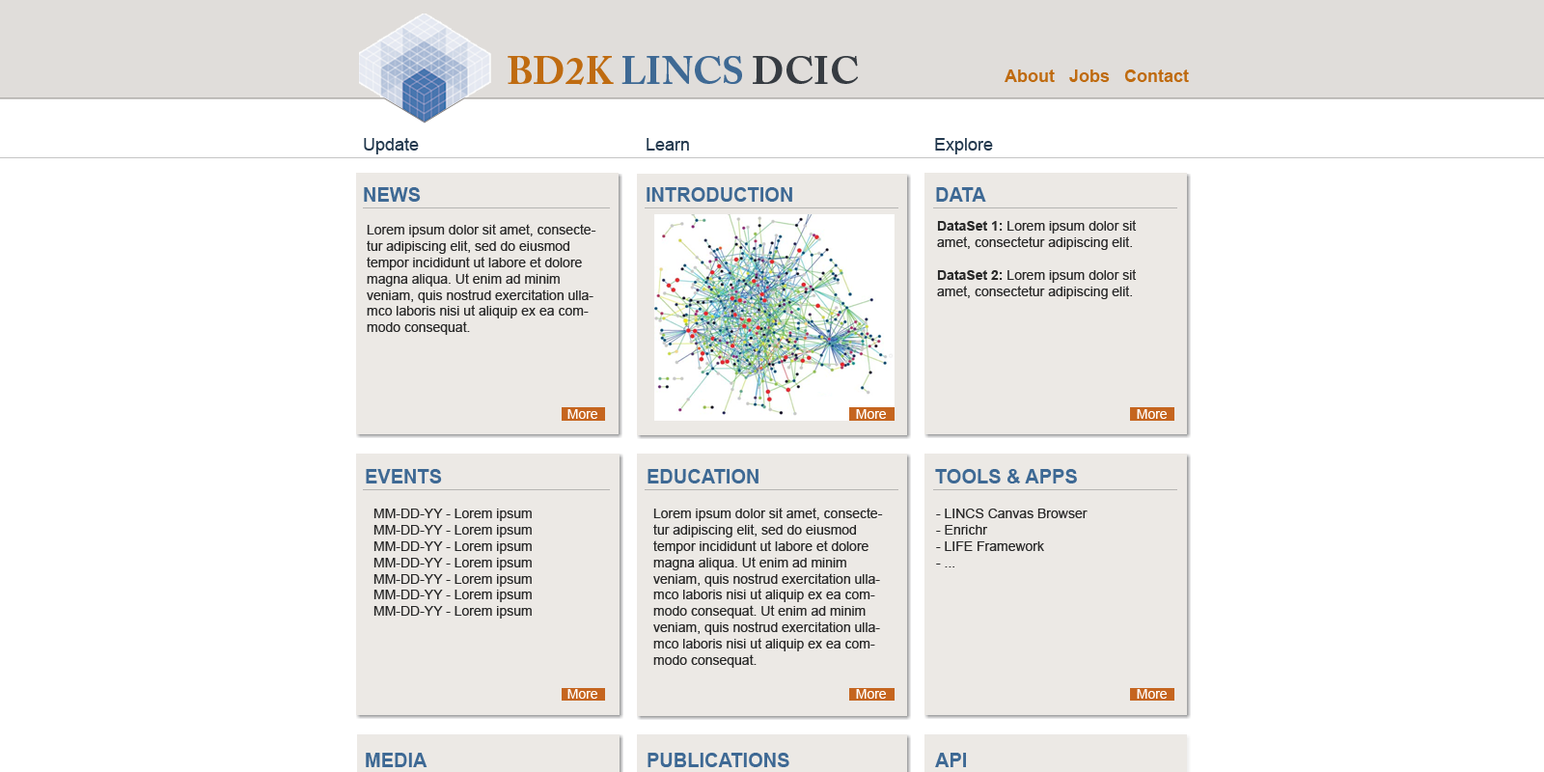
<style>
.page{position:relative;width:1544px;height:772px;background:#ffffff}
.page>*{position:absolute;margin:0}
.t1{font:38.6px "ACaslonPro-Bold";color:#3e6994}
.t2{font:38.6px "ACaslonPro-Bold";color:#bf6b10}
.t3{font:38.6px "ACaslonPro-Bold";color:#363b41}
.t4{font:17.4px "Arial-BoldMT";color:#bf6b10}
.t5{font:17.4px "ArialMT";color:#23394e}
.t6{font:19.3px "Arial-BoldMT";color:#3e6994}
.t7{font:13.5px "ArialMT";color:#292929}
.t8{font:13.5px "Arial-BoldMT";color:#292929}
.t9{font:13.5px "ArialMT";color:#ffffff}
</style>
<div class="page">
<p class="t1" style="left:508px;top:55px;width:350px;height:30px"><span class="t2">BD2K </span>LINCS <span class="t3">DCIC</span></p>
<p class="t4" style="left:1005px;top:69px;width:184px;height:13px">About   Jobs   Contact</p>
<p class="t5" style="left:364px;top:138px;width:55px;height:16px">Update</p>
<p class="t5" style="left:647px;top:138px;width:42px;height:13px">Learn</p>
<p class="t5" style="left:935px;top:138px;width:58px;height:16px">Explore</p>
<p class="t6" style="left:364px;top:187px;width:57px;height:15px">NEWS</p>
<p class="t6" style="left:647px;top:187px;width:145px;height:15px">INTRODUCTION</p>
<p class="t6" style="left:936px;top:187px;width:50px;height:15px">DATA</p>
<p class="t7" style="left:937px;top:220px;width:200px;height:79px"><span class="t8">DataSet 1:</span> Lorem ipsum dolor sit amet, consectetur adipiscing elit.<br><br><span class="t8">DataSet 2:</span> Lorem ipsum dolor sit amet, consectetur adipiscing elit.</p>
<p class="t7" style="left:367px;top:224px;width:229px;height:111px">Lorem ipsum dolor sit amet, consectetur adipiscing elit, sed do eiusmod tempor incididunt ut labore et dolore magna aliqua. Ut enim ad minim veniam, quis nostrud exercitation ullamco laboris nisi ut aliquip ex ea commodo consequat.</p>
<p class="t9" style="left:568px;top:409px;width:29px;height:10px">More</p>
<p class="t9" style="left:856px;top:409px;width:30px;height:10px">More</p>
<p class="t9" style="left:1137px;top:409px;width:30px;height:10px">More</p>
<p class="t6" style="left:366px;top:469px;width:76px;height:15px">EVENTS</p>
<p class="t6" style="left:648px;top:469px;width:111px;height:15px">EDUCATION</p>
<p class="t6" style="left:935px;top:469px;width:142px;height:15px">TOOLS &amp; APPS</p>
<p class="t7" style="left:374px;top:509px;width:158px;height:110px">MM-DD-YY - Lorem ipsum<br>MM-DD-YY - Lorem ipsum<br>MM-DD-YY - Lorem ipsum<br>MM-DD-YY - Lorem ipsum<br>MM-DD-YY - Lorem ipsum<br>MM-DD-YY - Lorem ipsum<br>MM-DD-YY - Lorem ipsum</p>
<p class="t7" style="left:653px;top:508px;width:230px;height:160px">Lorem ipsum dolor sit amet, consectetur adipiscing elit, sed do eiusmod tempor incididunt ut labore et dolore magna aliqua. Ut enim ad minim veniam, quis nostrud exercitation ullamco laboris nisi ut aliquip ex ea commodo consequat. Ut enim ad minim veniam, quis nostrud exercitation ullamco laboris nisi ut aliquip ex ea commodo consequat.</p>
<p class="t7" style="left:936px;top:509px;width:152px;height:59px">- LINCS Canvas Browser<br>- Enrichr<br>- LIFE Framework<br>- ...</p>
<p class="t9" style="left:568px;top:689px;width:29px;height:10px">More</p>
<p class="t9" style="left:856px;top:689px;width:30px;height:10px">More</p>
<p class="t9" style="left:1137px;top:689px;width:30px;height:10px">More</p>
<p class="t6" style="left:366px;top:753px;width:62px;height:14px">MEDIA</p>
<p class="t6" style="left:648px;top:753px;width:142px;height:14px">PUBLICATIONS</p>
<p class="t6" style="left:935px;top:753px;width:31px;height:14px">API</p>
</div>
